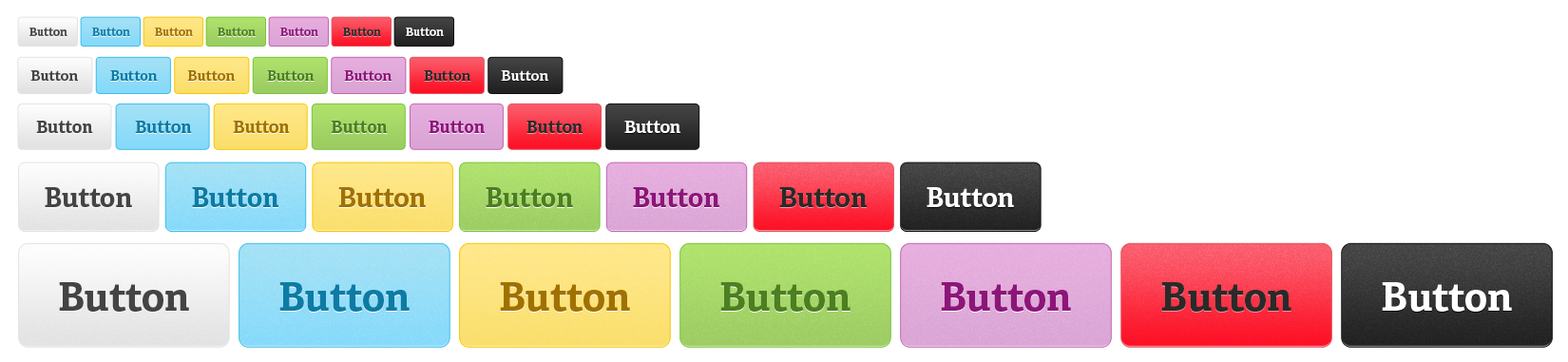
<style>
.page{position:relative;width:1568px;height:362px;background:#ffffff}
.page>*{position:absolute;margin:0}
.t1{font:11.4px "AdelleBasic-Bold";color:#444444}
.t2{font:11.4px "AdelleBasic-Bold";color:#0d7ba4}
.t3{font:11.4px "AdelleBasic-Bold";color:#a07100}
.t4{font:11.4px "AdelleBasic-Bold";color:#4b7f20}
.t5{font:11.4px "AdelleBasic-Bold";color:#8d1579}
.t6{font:11.4px "AdelleBasic-Bold";color:#2a2a2a}
.t7{font:11.4px "AdelleBasic-Bold";color:#ffffff}
.t8{font:14.3px "AdelleBasic-Bold";color:#444444}
.t9{font:14.3px "AdelleBasic-Bold";color:#0d7ba4}
.t10{font:14.3px "AdelleBasic-Bold";color:#a07100}
.t11{font:14.3px "AdelleBasic-Bold";color:#4b7f20}
.t12{font:14.3px "AdelleBasic-Bold";color:#8d1579}
.t13{font:14.3px "AdelleBasic-Bold";color:#2a2a2a}
.t14{font:14.3px "AdelleBasic-Bold";color:#ffffff}
.t15{font:17.1px "AdelleBasic-Bold";color:#444444}
.t16{font:17.1px "AdelleBasic-Bold";color:#0d7ba4}
.t17{font:17.1px "AdelleBasic-Bold";color:#a07100}
.t18{font:17.1px "AdelleBasic-Bold";color:#4b7f20}
.t19{font:17.1px "AdelleBasic-Bold";color:#8d1579}
.t20{font:17.1px "AdelleBasic-Bold";color:#2a2a2a}
.t21{font:17.1px "AdelleBasic-Bold";color:#ffffff}
.t22{font:26.6px "AdelleBasic-Bold";color:#444444}
.t23{font:26.6px "AdelleBasic-Bold";color:#0d7ba4}
.t24{font:26.6px "AdelleBasic-Bold";color:#a07100}
.t25{font:26.6px "AdelleBasic-Bold";color:#4b7f20}
.t26{font:26.6px "AdelleBasic-Bold";color:#8d1579}
.t27{font:26.6px "AdelleBasic-Bold";color:#2a2a2a}
.t28{font:26.6px "AdelleBasic-Bold";color:#ffffff}
.t29{font:39.9px "AdelleBasic-Bold";color:#444444}
.t30{font:39.9px "AdelleBasic-Bold";color:#0d7ba4}
.t31{font:39.9px "AdelleBasic-Bold";color:#a07100}
.t32{font:39.9px "AdelleBasic-Bold";color:#4b7f20}
.t33{font:39.9px "AdelleBasic-Bold";color:#8d1579}
.t34{font:39.9px "AdelleBasic-Bold";color:#2a2a2a}
.t35{font:39.9px "AdelleBasic-Bold";color:#ffffff}
</style>
<div class="page">
<p class="t1" style="left:29px;top:28px;width:38px;height:8px">Button</p>
<p class="t2" style="left:92px;top:28px;width:38px;height:8px">Button</p>
<p class="t3" style="left:155px;top:28px;width:38px;height:8px">Button</p>
<p class="t4" style="left:218px;top:28px;width:38px;height:8px">Button</p>
<p class="t5" style="left:280px;top:28px;width:38px;height:8px">Button</p>
<p class="t6" style="left:343px;top:28px;width:38px;height:8px">Button</p>
<p class="t7" style="left:406px;top:28px;width:38px;height:8px">Button</p>
<p class="t8" style="left:30px;top:70px;width:48px;height:11px">Button</p>
<p class="t9" style="left:110px;top:70px;width:48px;height:11px">Button</p>
<p class="t10" style="left:187px;top:70px;width:48px;height:11px">Button</p>
<p class="t11" style="left:267px;top:70px;width:48px;height:11px">Button</p>
<p class="t12" style="left:344px;top:70px;width:48px;height:11px">Button</p>
<p class="t13" style="left:424px;top:70px;width:47px;height:11px">Button</p>
<p class="t14" style="left:501px;top:70px;width:47px;height:11px">Button</p>
<p class="t15" style="left:36px;top:121px;width:57px;height:12px">Button</p>
<p class="t16" style="left:135px;top:121px;width:57px;height:12px">Button</p>
<p class="t17" style="left:233px;top:121px;width:57px;height:12px">Button</p>
<p class="t18" style="left:331px;top:121px;width:57px;height:12px">Button</p>
<p class="t19" style="left:429px;top:121px;width:56px;height:12px">Button</p>
<p class="t20" style="left:526px;top:121px;width:57px;height:12px">Button</p>
<p class="t21" style="left:624px;top:121px;width:56px;height:12px">Button</p>
<p class="t22" style="left:45px;top:187px;width:87px;height:20px">Button</p>
<p class="t23" style="left:192px;top:187px;width:86px;height:20px">Button</p>
<p class="t24" style="left:338px;top:187px;width:88px;height:20px">Button</p>
<p class="t25" style="left:486px;top:187px;width:87px;height:20px">Button</p>
<p class="t26" style="left:633px;top:187px;width:86px;height:20px">Button</p>
<p class="t27" style="left:779px;top:187px;width:88px;height:20px">Button</p>
<p class="t28" style="left:927px;top:187px;width:87px;height:20px">Button</p>
<p class="t29" style="left:59px;top:282px;width:130px;height:30px">Button</p>
<p class="t30" style="left:279px;top:282px;width:131px;height:30px">Button</p>
<p class="t31" style="left:500px;top:282px;width:130px;height:30px">Button</p>
<p class="t32" style="left:720px;top:282px;width:131px;height:30px">Button</p>
<p class="t33" style="left:941px;top:282px;width:130px;height:30px">Button</p>
<p class="t34" style="left:1161px;top:282px;width:130px;height:30px">Button</p>
<p class="t35" style="left:1382px;top:282px;width:130px;height:30px">Button</p>
</div>
